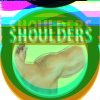
<style>
.page{position:relative;width:100px;height:100px}
.page>*{position:absolute;margin:0}
.t1{font:20.8px "MyriadPro-BoldCond"}
</style>
<div class="page">
<p class="t1" style="left:9px;top:19px;width:83px;height:14px">SHOULDERS</p>
</div>
